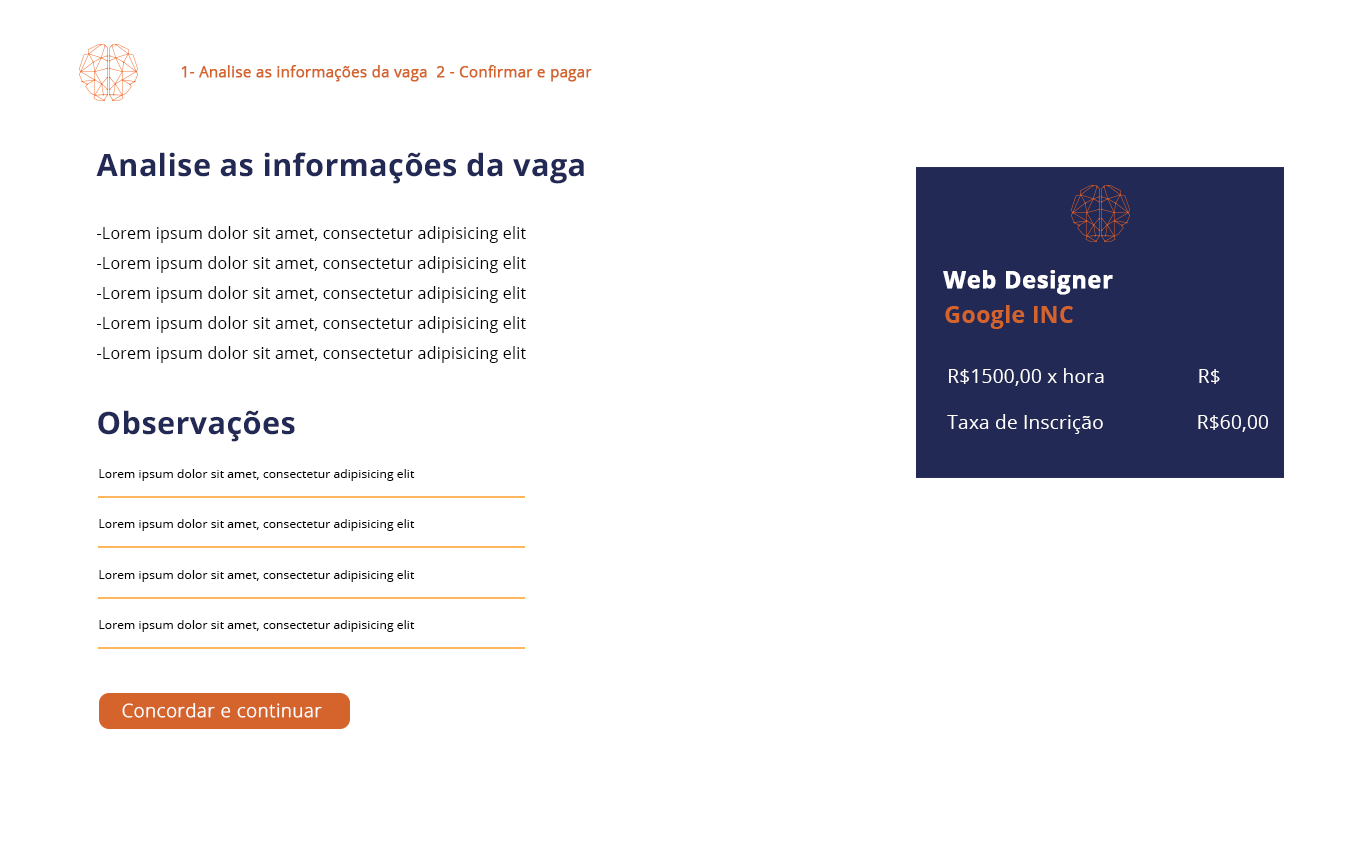
<style>
.page{position:relative;width:1350px;height:850px;background:#ffffff}
.page>*{position:absolute;margin:0}
.t1{font:14.6px "OpenSans";letter-spacing:0.01em;color:#d4642b;font-weight:bold}
.t2{font:30.8px "OpenSans-Bold";letter-spacing:0.01em;color:#232955}
.t3{font:16.1px/30px "OpenSans";letter-spacing:0.01em;color:#000000}
.t4{font:23.3px "OpenSans-Bold";letter-spacing:0.01em;color:#ffffff;font-weight:bold}
.t5{font:23.3px "OpenSans-Bold";letter-spacing:0.01em;color:#d4642b}
.t6{font:19.1px/23.2px "OpenSans";letter-spacing:0.01em;color:#ffffff}
.t7{font:12px "OpenSans";letter-spacing:0.01em;color:#000000}
.t8{font:18.4px "OpenSans-Light";letter-spacing:0.01em;color:#ffffff;font-weight:bold}
</style>
<div class="page">
<p class="t1" style="left:181px;top:65px;width:411px;height:17px">1- Analise as informações da vaga  2 - Confirmar e pagar</p>
<p class="t2" style="left:96px;top:152px;width:488px;height:32px">Analise as informações da vaga</p>
<p class="t3" style="left:97px;top:226px;width:429px;height:137px">-Lorem ipsum dolor sit amet, consectetur adipisicing elit<br>-Lorem ipsum dolor sit amet, consectetur adipisicing elit<br>-Lorem ipsum dolor sit amet, consectetur adipisicing elit<br>-Lorem ipsum dolor sit amet, consectetur adipisicing elit<br>-Lorem ipsum dolor sit amet, consectetur adipisicing elit</p>
<p class="t4" style="left:943px;top:270px;width:170px;height:25px">Web Designer</p>
<p class="t5" style="left:945px;top:305px;width:128px;height:24px">Google INC</p>
<p class="t6" style="left:947px;top:368px;width:321px;height:66px">R$1500,00 x hora                  R$<br><br>Taxa de Inscrição                  R$60,00</p>
<p class="t2" style="left:98px;top:410px;width:197px;height:32px">Observações</p>
<p class="t7" style="left:99px;top:469px;width:316px;height:12px">Lorem ipsum dolor sit amet, consectetur adipisicing elit</p>
<p class="t7" style="left:99px;top:519px;width:316px;height:12px">Lorem ipsum dolor sit amet, consectetur adipisicing elit</p>
<p class="t7" style="left:99px;top:570px;width:316px;height:12px">Lorem ipsum dolor sit amet, consectetur adipisicing elit</p>
<p class="t7" style="left:99px;top:620px;width:316px;height:12px">Lorem ipsum dolor sit amet, consectetur adipisicing elit</p>
<p class="t8" style="left:122px;top:702px;width:200px;height:16px">Concordar e continuar</p>
</div>
